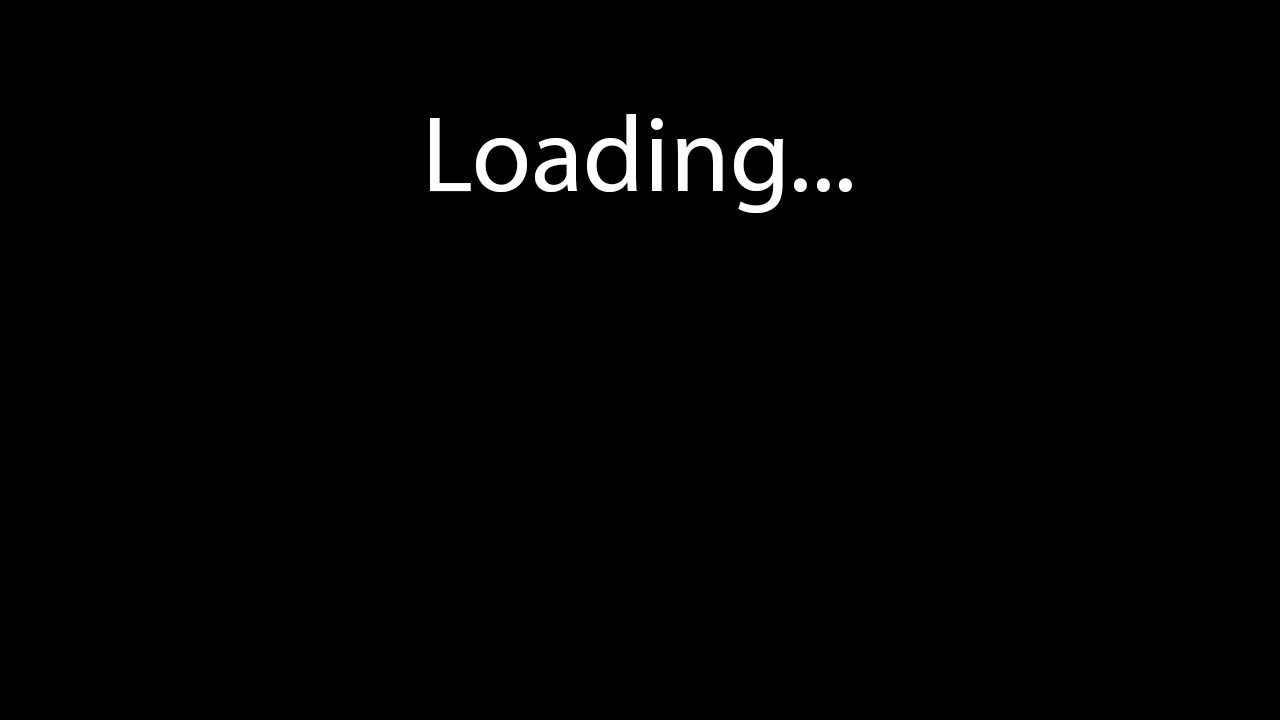
<style>
.page{position:relative;width:1280px;height:720px;background:#000000}
.page>*{position:absolute;margin:0}
.t1{font:108.1px "MyriadPro-Regular";color:#ffffff}
</style>
<div class="page">
<p class="t1" style="left:430px;top:114px;width:422px;height:99px">Loading...</p>
</div>
